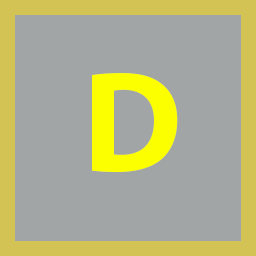
<style>
.page{position:relative;width:256px;height:256px;background:#a2a5a5}
.page>*{position:absolute;margin:0}
.t1{font:144px "MyriadPro-Bold";color:#fcff00}
</style>
<div class="page">
<p class="t1" style="left:92px;top:73px;width:86px;height:100px">D</p>
</div>
